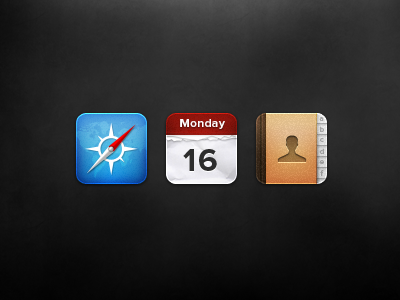
<style>
.page{position:relative;width:400px;height:300px}
.page>*{position:absolute;margin:0}
.t1{font:12px "ProximaNova-Bold";letter-spacing:0.02em;color:#ffffff}
.t2{font:8px "ProximaNova-Bold";letter-spacing:0.05em;color:#a4a4a4}
.t3{font:32px "ProximaNova-Bold";letter-spacing:0.05em;color:#2d2d2d}
.t4{font:8px "ProximaNova-Bold";letter-spacing:0.05em;color:#9d9d9d}
.t5{font:8px "ProximaNova-Bold";letter-spacing:0.05em}
.t6{font:8px "ProximaNova-Bold";letter-spacing:0.05em;color:#9a9a9a}
.t7{font:8px "ProximaNova-Bold";letter-spacing:0.05em;color:#999999}
</style>
<div class="page">
<p class="t1" style="left:180px;top:119px;width:45px;height:10px">Monday</p>
<p class="t2" style="left:319px;top:117px;width:5px;height:4px">a</p>
<p class="t2" style="left:320px;top:126px;width:4px;height:6px">b</p>
<p class="t3" style="left:183px;top:149px;width:34px;height:22px">16</p>
<p class="t4" style="left:319px;top:148px;width:5px;height:6px">d</p>
<p class="t5" style="left:320px;top:138px;width:4px;height:4px">c</p>
<p class="t6" style="left:319px;top:160px;width:5px;height:4px">e</p>
<p class="t7" style="left:320px;top:170px;width:4px;height:6px">f</p>
</div>
